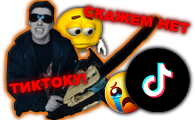
<style>
.page{position:relative;width:195px;height:120px}
.page>*{position:absolute;margin:0}
.t1{font:14px "Arial-Black";color:#ff0000}
</style>
<div class="page">
<p class="t1" style="left:84px;top:6px;width:106px;height:27px;rotate:9deg">СКАЖЕМ НЕТ</p>
<p class="t1" style="left:9px;top:73px;width:78px;height:21px;rotate:-8deg">ТИКТОКУ!</p>
</div>
